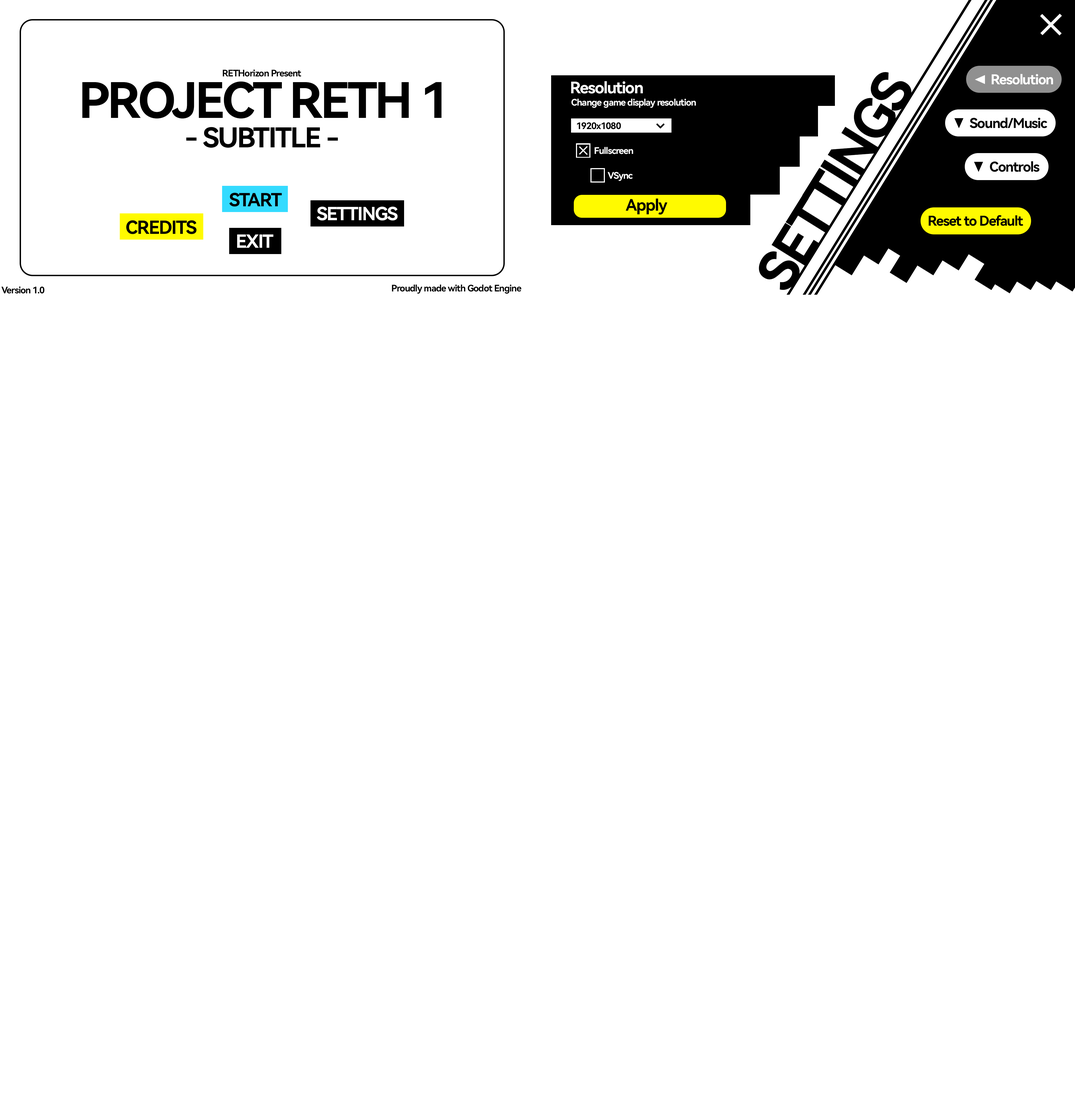
<style>
.page{position:relative;width:1075px;height:1109px;background:#ffffff}
.page>*{position:absolute;margin:0}
.t1{font:9.1px "HarmonyOS_Sans_Bold";letter-spacing:-0.05em;color:#000000}
.t2{font:54.6px "HarmonyOS_Sans_Bold";letter-spacing:-0.05em;color:#000000}
.t3{font:13.6px "HarmonyOS_Sans_Bold";letter-spacing:-0.05em;color:#ffffff}
.t4{font:48.8px "HarmonyOS_Sans_Bold";letter-spacing:-0.05em;color:#000000}
.t5{font:15.9px "HarmonyOS_Sans_Bold";letter-spacing:-0.05em;color:#ffffff}
.t6{font:9.1px "HarmonyOS_Sans_Bold";letter-spacing:-0.05em;color:#ffffff}
.t7{font:13.6px "HarmonyOS_Sans_Bold";letter-spacing:-0.05em;color:#000000}
.t8{font:27.3px "HarmonyOS_Sans_Bold";letter-spacing:-0.05em;color:#000000}
.t9{font:18.2px "HarmonyOS_Sans_Bold";letter-spacing:-0.05em;color:#000000}
.t10{font:18.2px "HarmonyOS_Sans_Bold";letter-spacing:-0.05em;color:#ffffff}
.t11{font:15.9px "HarmonyOS_Sans_Bold";letter-spacing:-0.05em;color:#000000}
</style>
<div class="page">
<p class="t1" style="left:223px;top:69px;width:78px;height:8px">RETHorizon Present</p>
<p class="t2" style="left:759px;top:72px;width:153px;height:218px;rotate:-58deg">SETTINGS</p>
<p class="t3" style="left:992px;top:74px;width:61px;height:11px">Resolution</p>
<p class="t4" style="left:82px;top:81px;width:360px;height:38px">PROJECT RETH 1</p>
<p class="t5" style="left:571px;top:81px;width:72px;height:13px">Resolution</p>
<p class="t6" style="left:571px;top:99px;width:125px;height:9px">Change game display resolution</p>
<p class="t1" style="left:577px;top:122px;width:44px;height:7px">1920x1080</p>
<p class="t7" style="left:970px;top:118px;width:77px;height:10px">Sound/Music</p>
<p class="t8" style="left:186px;top:127px;width:152px;height:21px">SUBTITLE -</p>
<p class="t6" style="left:595px;top:147px;width:38px;height:7px">Fullscreen</p>
<p class="t7" style="left:990px;top:161px;width:50px;height:11px">Controls</p>
<p class="t6" style="left:608px;top:172px;width:25px;height:9px">VSync</p>
<p class="t9" style="left:229px;top:193px;width:53px;height:14px">START</p>
<p class="t10" style="left:317px;top:207px;width:81px;height:13px">SETTINGS</p>
<p class="t11" style="left:626px;top:198px;width:41px;height:17px">Apply</p>
<p class="t9" style="left:126px;top:220px;width:70px;height:14px">CREDITS</p>
<p class="t7" style="left:929px;top:215px;width:95px;height:11px">Reset to Default</p>
<p class="t10" style="left:237px;top:234px;width:36px;height:14px">EXIT</p>
<p class="t1" style="left:1px;top:286px;width:43px;height:8px">Version 1.0</p>
<p class="t1" style="left:392px;top:284px;width:129px;height:10px">Proudly made with Godot Engine</p>
</div>
